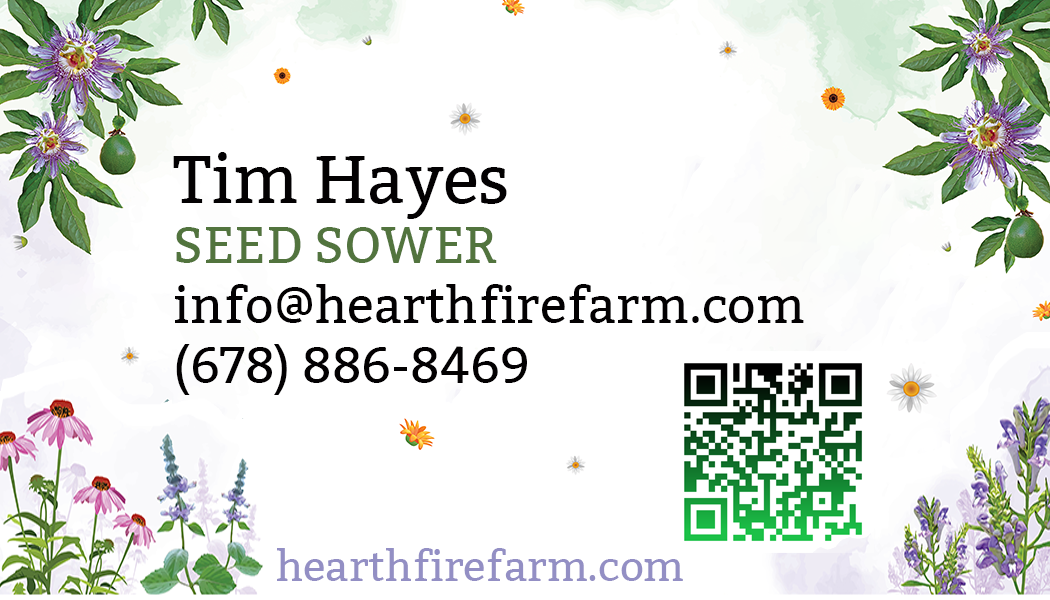
<style>
.page{position:relative;width:1050px;height:600px;background:#ffffff}
.page>*{position:absolute;margin:0}
.t1{font:50px "Bitter-Regular";color:#030102}
.t2{font:66.7px "Bitter-Regular";color:#030102}
.t3{font:50px "Bitter-Regular";color:#52743e}
.t4{font:41.7px "Bitter-Regular";color:#938fc4}
</style>
<div class="page">
<p class="t1" style="left:173px;top:152px;width:631px;height:243px"><span class="t2">Tim Hayes<br></span><span class="t3">SEED SOWER<br></span>info@hearthfirefarm.com<br>(678) 886-8469</p>
<p class="t4" style="left:277px;top:548px;width:406px;height:33px">hearthfirefarm.com</p>
</div>
